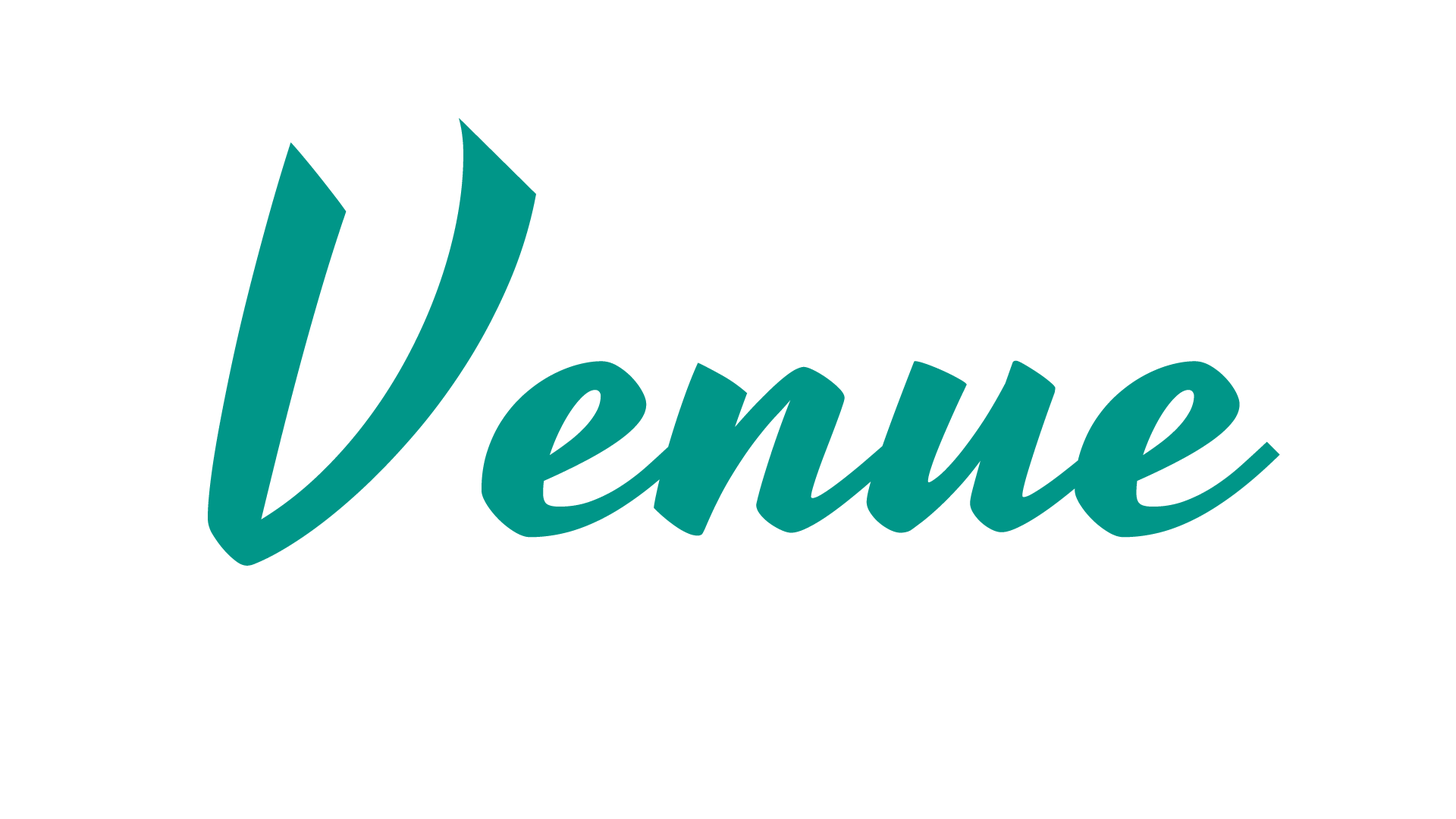
<style>
.page{position:relative;width:1456px;height:819px;background:#ffffff}
.page>*{position:absolute;margin:0}
.t1{font:530.8px "Yesteryear-Regular";color:#009688}
</style>
<div class="page">
<p class="t1" style="left:208px;top:118px;width:1072px;height:448px">Venue</p>
</div>
